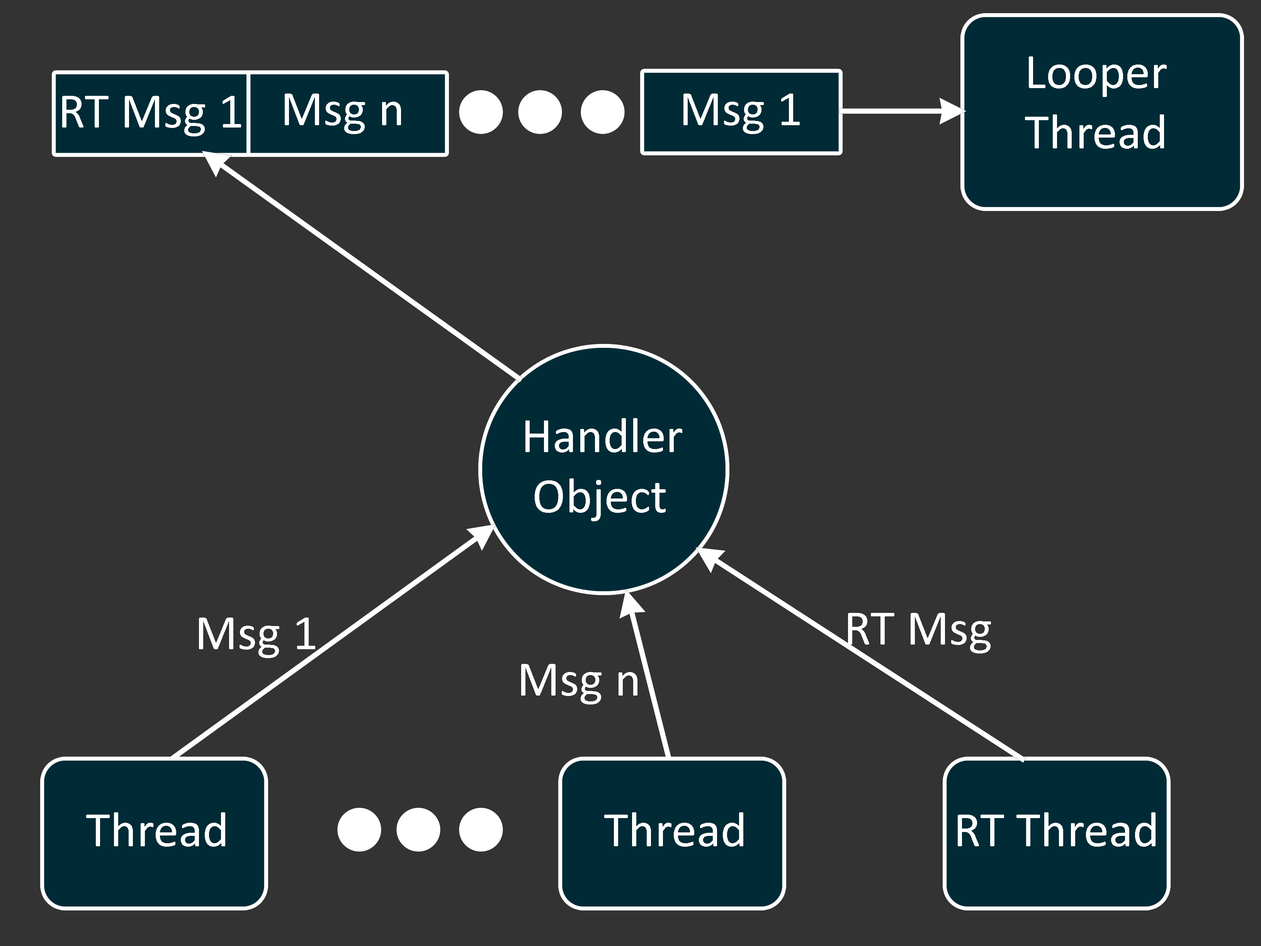
<style>
.page{position:relative;width:1261px;height:946px;background:#333333}
.page>*{position:absolute;margin:0}
.t1{font:50.2px "Calibri";color:#ffffff}
</style>
<div class="page">
<p class="t1" style="left:1025px;top:56px;width:142px;height:93px">Looper<br>Thread</p>
<p class="t1" style="left:62px;top:96px;width:179px;height:40px">RT Msg 1</p>
<p class="t1" style="left:285px;top:93px;width:116px;height:41px">Msg n</p>
<p class="t1" style="left:683px;top:93px;width:117px;height:41px">Msg 1</p>
<p class="t1" style="left:525px;top:418px;width:157px;height:103px">Handler<br> Object</p>
<p class="t1" style="left:199px;top:617px;width:116px;height:41px">Msg 1</p>
<p class="t1" style="left:848px;top:613px;width:143px;height:40px">RT Msg</p>
<p class="t1" style="left:521px;top:664px;width:116px;height:40px">Msg n</p>
<p class="t1" style="left:86px;top:812px;width:139px;height:34px">Thread</p>
<p class="t1" style="left:958px;top:812px;width:197px;height:34px">RT Thread</p>
</div>
